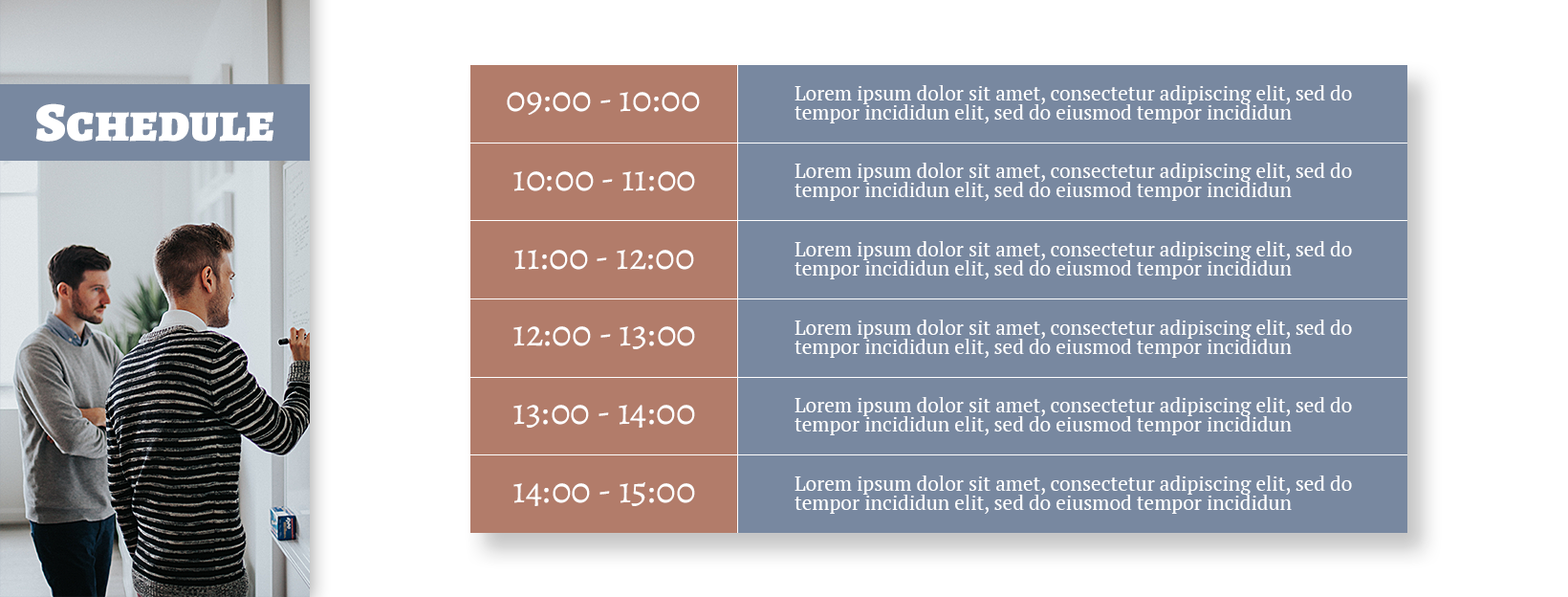
<style>
.page{position:relative;width:1568px;height:597px;background:#ffffff}
.page>*{position:absolute;margin:0}
.t1{font:20.1px/19.1px "PTSerif-Regular";color:#ffffff}
.t2{font:37.3px "AlegreyaSC-Regular";color:#ffffff}
.t3{font:55.5px "AlegreyaSC-Black";color:#ffffff}
</style>
<div class="page">
<p class="t1" style="left:795px;top:85px;width:557px;height:38px">Lorem ipsum dolor sit amet, consectetur adipiscing elit, sed do <br>tempor incididun elit, sed do eiusmod tempor incididun</p>
<p class="t2" style="left:507px;top:92px;width:193px;height:23px">09:00 - 10:00</p>
<p class="t3" style="left:35px;top:103px;width:238px;height:39px">Schedule</p>
<p class="t2" style="left:513px;top:171px;width:182px;height:20px">10:00 - 11:00</p>
<p class="t1" style="left:795px;top:163px;width:557px;height:38px">Lorem ipsum dolor sit amet, consectetur adipiscing elit, sed do <br>tempor incididun elit, sed do eiusmod tempor incididun</p>
<p class="t1" style="left:795px;top:241px;width:557px;height:38px">Lorem ipsum dolor sit amet, consectetur adipiscing elit, sed do <br>tempor incididun elit, sed do eiusmod tempor incididun</p>
<p class="t2" style="left:514px;top:250px;width:180px;height:20px">11:00 - 12:00</p>
<p class="t2" style="left:513px;top:326px;width:182px;height:23px">12:00 - 13:00</p>
<p class="t1" style="left:795px;top:319px;width:557px;height:39px">Lorem ipsum dolor sit amet, consectetur adipiscing elit, sed do <br>tempor incididun elit, sed do eiusmod tempor incididun</p>
<p class="t1" style="left:795px;top:397px;width:557px;height:38px">Lorem ipsum dolor sit amet, consectetur adipiscing elit, sed do <br>tempor incididun elit, sed do eiusmod tempor incididun</p>
<p class="t2" style="left:513px;top:404px;width:182px;height:23px">13:00 - 14:00</p>
<p class="t2" style="left:513px;top:482px;width:182px;height:24px">14:00 - 15:00</p>
<p class="t1" style="left:795px;top:475px;width:557px;height:38px">Lorem ipsum dolor sit amet, consectetur adipiscing elit, sed do <br>tempor incididun elit, sed do eiusmod tempor incididun</p>
</div>
